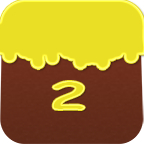
<style>
.page{position:relative;width:144px;height:144px;background:#ebdf26}
.page>*{position:absolute;margin:0}
.t1{font:38.7px "ComicSansMS-Bold";scale:1.67 1}
</style>
<div class="page">
<p class="t1" style="left:52px;top:81px;width:33px;height:29px">2</p>
</div>
